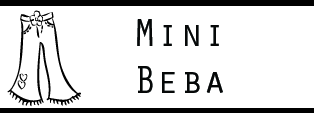
<style>
.page{position:relative;width:314px;height:113px;background:#ffffff}
.page>*{position:absolute;margin:0}
.t1{font:39px "OratorStd";color:#060808}
</style>
<div class="page">
<p class="t1" style="left:137px;top:19px;width:86px;height:74px">Mini<br>Beba</p>
</div>
